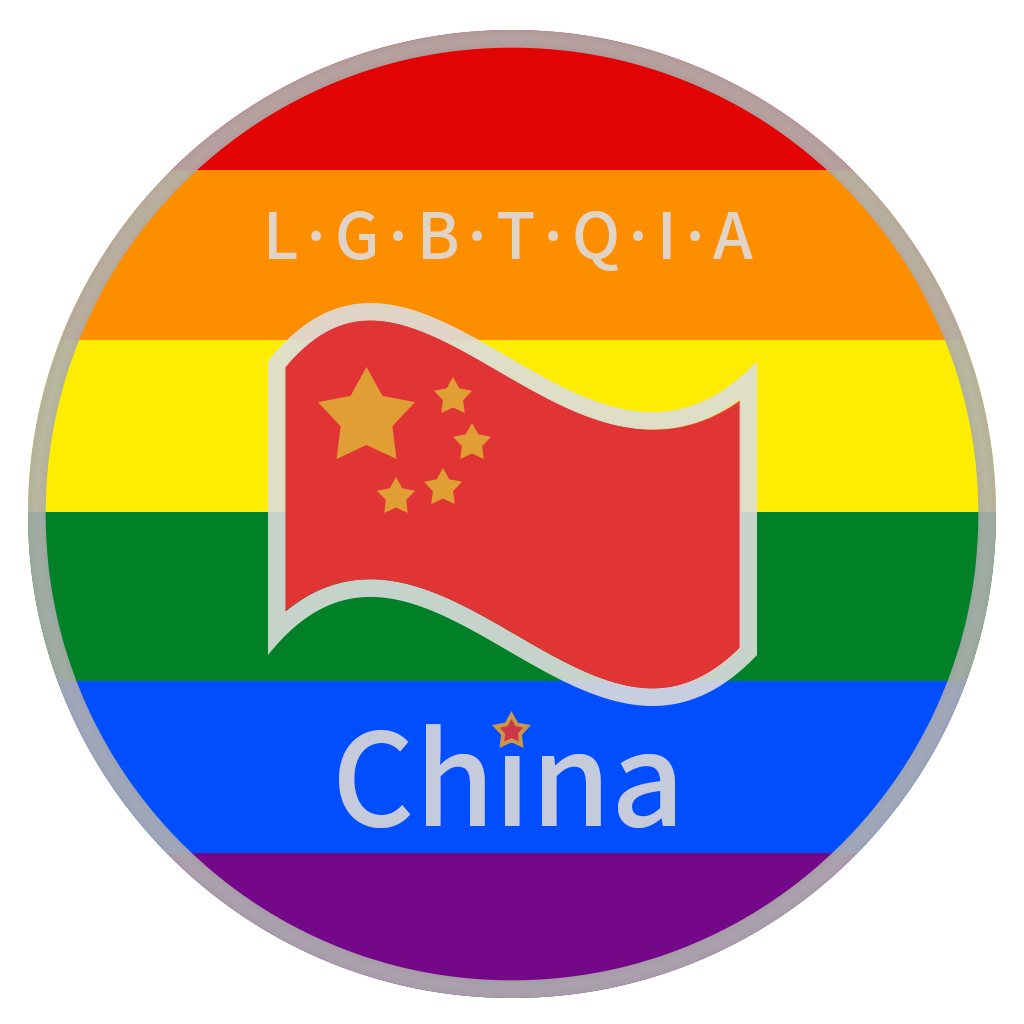
<style>
.page{position:relative;width:1024px;height:1024px;background:#ffffff}
.page>*{position:absolute;margin:0}
.t1{font:64px "NotoSansCJK-Medium";color:#dcdcdc}
.t2{font:128px "NotoSansCJK-Medium";color:#dad9d7}
</style>
<div class="page">
<p class="t1" style="left:269px;top:211px;width:484px;height:60px">L·G·B·T·Q·I·A</p>
<p class="t2" style="left:339px;top:724px;width:336px;height:105px">China</p>
</div>
